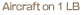
<style>
.page{position:relative;width:83px;height:15px;background:#ffffff}
.page>*{position:absolute;margin:0}
.t1{font:10px "GothicMB101Pro-DeBold";letter-spacing:-0.08em;color:#8b6e51}
</style>
<div class="page">
<p class="t1" style="left:2px;top:2px;width:78px;height:9px;opacity:0.9">Aircraft on 1 LB</p>
</div>
